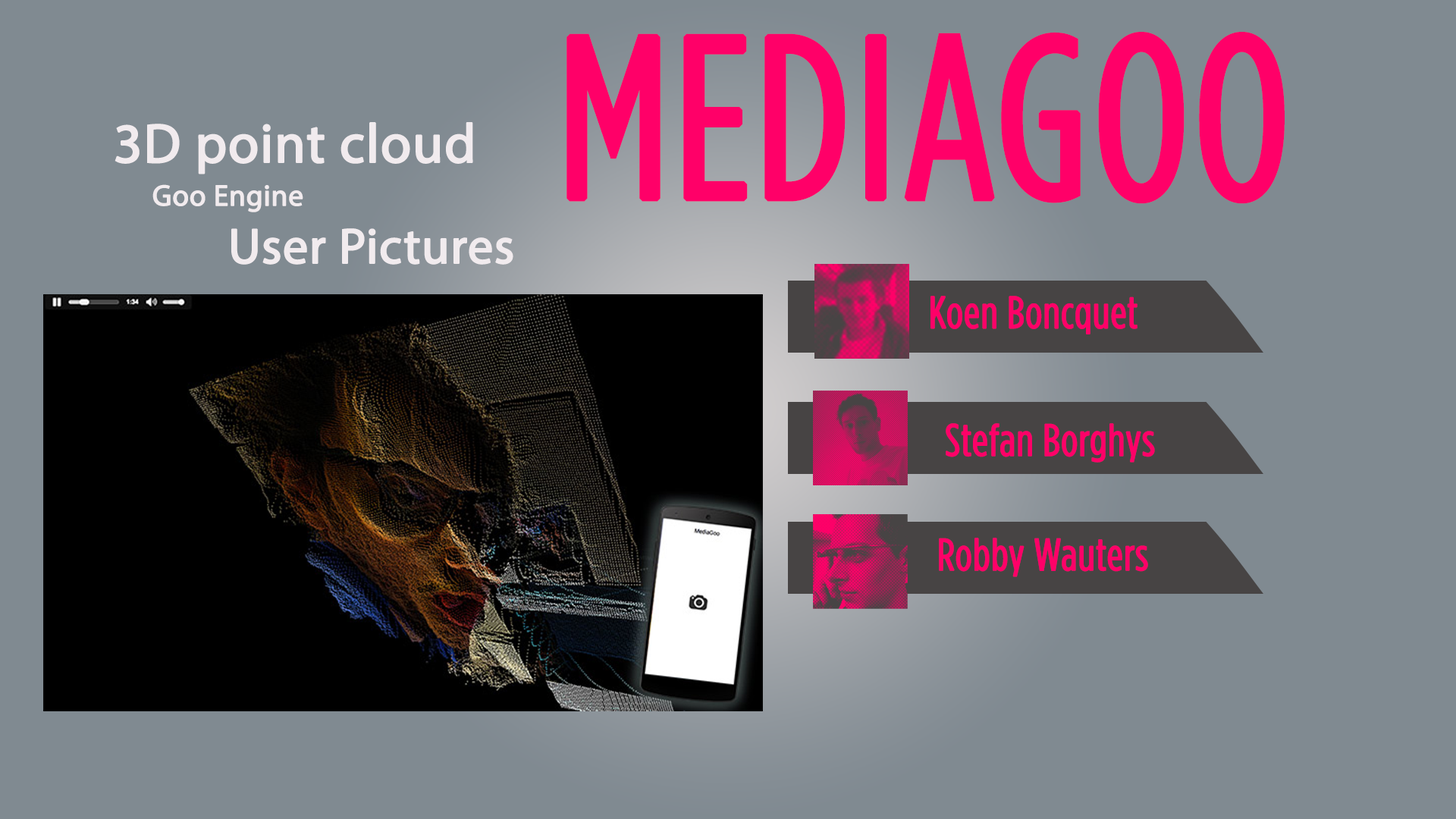
<style>
.page{position:relative;width:1456px;height:819px;background:#808a91}
.page>*{position:absolute;margin:0}
.t1{font:230.2px "GothamCondensed-Book";color:#ff0068;font-weight:bold}
.t2{font:55.4px "MyriadPro-Regular";color:#f1ebee;font-weight:bold}
.t3{font:29.6px "MyriadPro-Regular";color:#f1ebee;font-weight:bold}
.t4{font:50.1px "MyriadPro-Regular";color:#f1ebee;font-weight:bold}
.t5{font:44.8px "GothamCondensed-Book";color:#ff0068;font-weight:bold}
.t6{font:77.9px "GothamCondensed-Book";color:#ff0068;font-weight:bold}
</style>
<div class="page">
<p class="t1" style="left:566px;top:32px;width:719px;height:172px">MEDIAGOO</p>
<p class="t2" style="left:115px;top:122px;width:358px;height:52px">3D point cloud</p>
<p class="t3" style="left:152px;top:184px;width:151px;height:28px">Goo Engine</p>
<p class="t4" style="left:231px;top:228px;width:282px;height:37px">User Pictures</p>
<p class="t5" style="left:930px;top:296px;width:207px;height:38px">Koen Boncquet</p>
<p class="t5" style="left:946px;top:423px;width:209px;height:40px"><span class="t6"> </span>    Stefan Borghys</p>
<p class="t5" style="left:939px;top:538px;width:209px;height:39px"><span class="t6">  </span>Robby Wauters</p>
</div>
